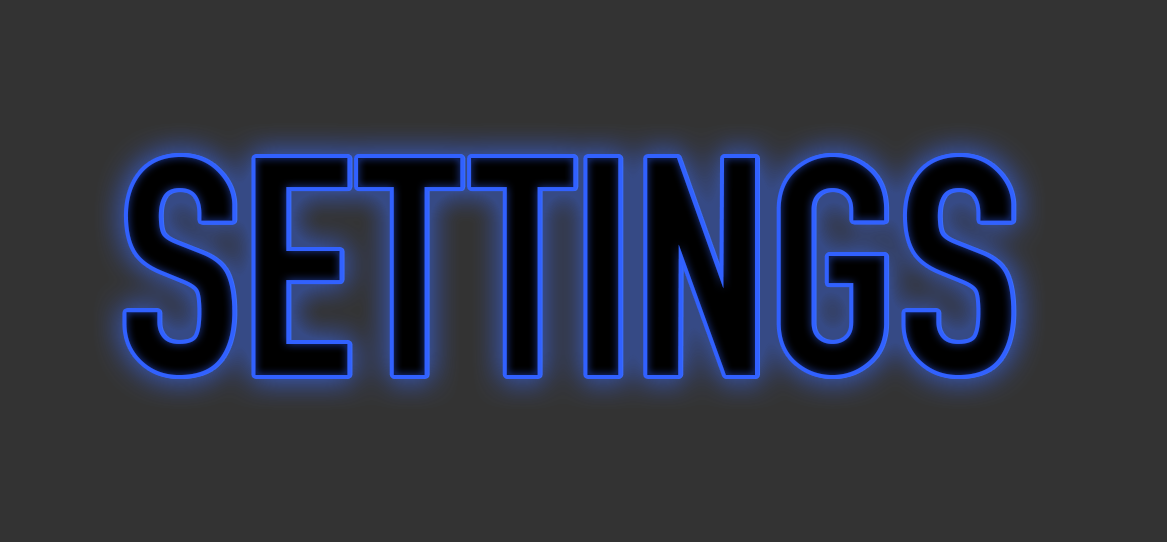
<style>
.page{position:relative;width:1167px;height:542px;background:#333333}
.page>*{position:absolute;margin:0}
.t1{font:302.5px "DINEngschrift";color:#010204}
</style>
<div class="page">
<p class="t1" style="left:126px;top:157px;width:886px;height:218px">SETTINGS</p>
<p class="t1" style="left:127px;top:157px;width:886px;height:218px">SETTINGS</p>
</div>
